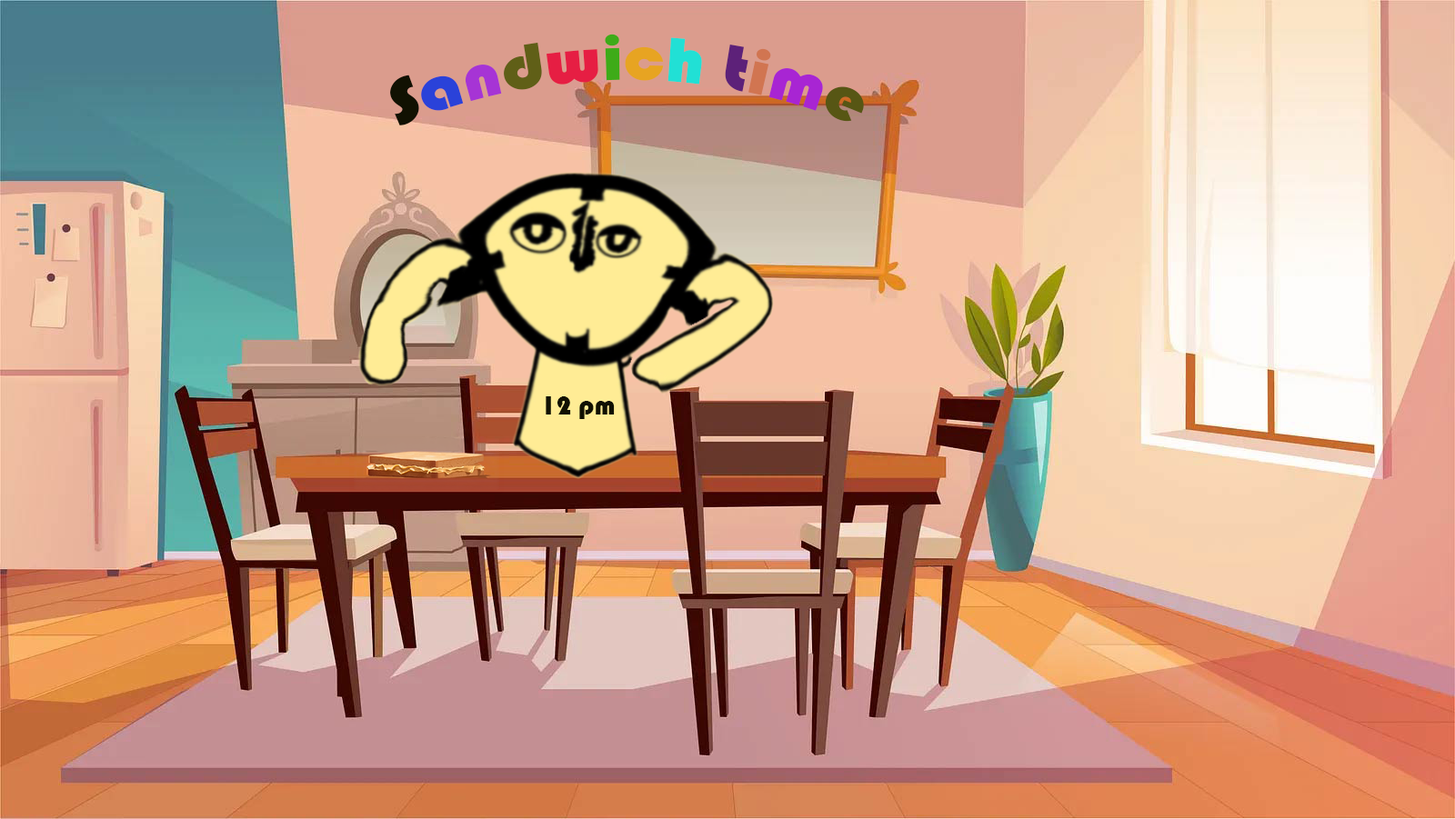
<style>
.page{position:relative;width:1455px;height:819px}
.page>*{position:absolute;margin:0}
.t1{font:65.5px "Bauhaus93";color:#111102}
.t2{font:65.5px "Bauhaus93";color:#2a42d9}
.t3{font:65.5px "Bauhaus93";color:#a634d5}
.t4{font:65.5px "Bauhaus93";color:#605f17}
.t5{font:65.5px "Bauhaus93";color:#e61e43}
.t6{font:65.5px "Bauhaus93";color:#3eab18}
.t7{font:65.5px "Bauhaus93";color:#e7a422}
.t8{font:65.5px "Bauhaus93";color:#21e0d5}
.t9{font:65.5px "Bauhaus93";color:#5d2179}
.t10{font:65.5px "Bauhaus93";color:#d17551}
.t11{font:65.5px "Bauhaus93";color:#a825d3}
.t12{font:65.5px "Bauhaus93";color:#575614}
.t13{font:27.3px "Bauhaus93";color:#111102}
</style>
<div class="page">
<p class="t1" style="left:390px;top:34px;width:474px;height:92px">S<span class="t2">a</span><span class="t3">n</span><span class="t4">d</span><span class="t5">w</span><span class="t6">i</span><span class="t7">c</span><span class="t8">h </span><span class="t9">t</span><span class="t10">i</span><span class="t11">m</span><span class="t12">e</span></p>
<p class="t13" style="left:546px;top:397px;width:69px;height:22px">12 pm</p>
</div>
